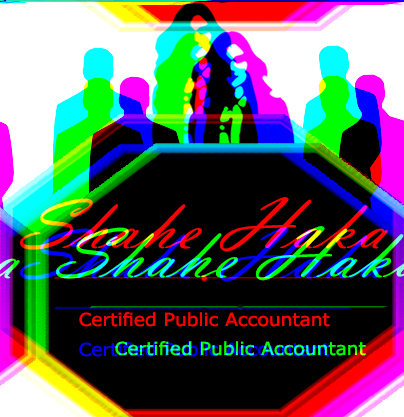
<style>
.page{position:relative;width:404px;height:417px;background:#000000}
.page>*{position:absolute;margin:0}
.t1{font:72px "VladimirScript";letter-spacing:0.025em;scale:1.12 1}
.t2{font:18px "Tahoma";letter-spacing:0.025em;scale:1.12 1}
</style>
<div class="page">
<p class="t1" style="left:20px;top:195px;width:368px;height:55px">Shahe Haka</p>
<p class="t2" style="left:79px;top:310px;width:251px;height:15px">Certified Public Accountant</p>
</div>
